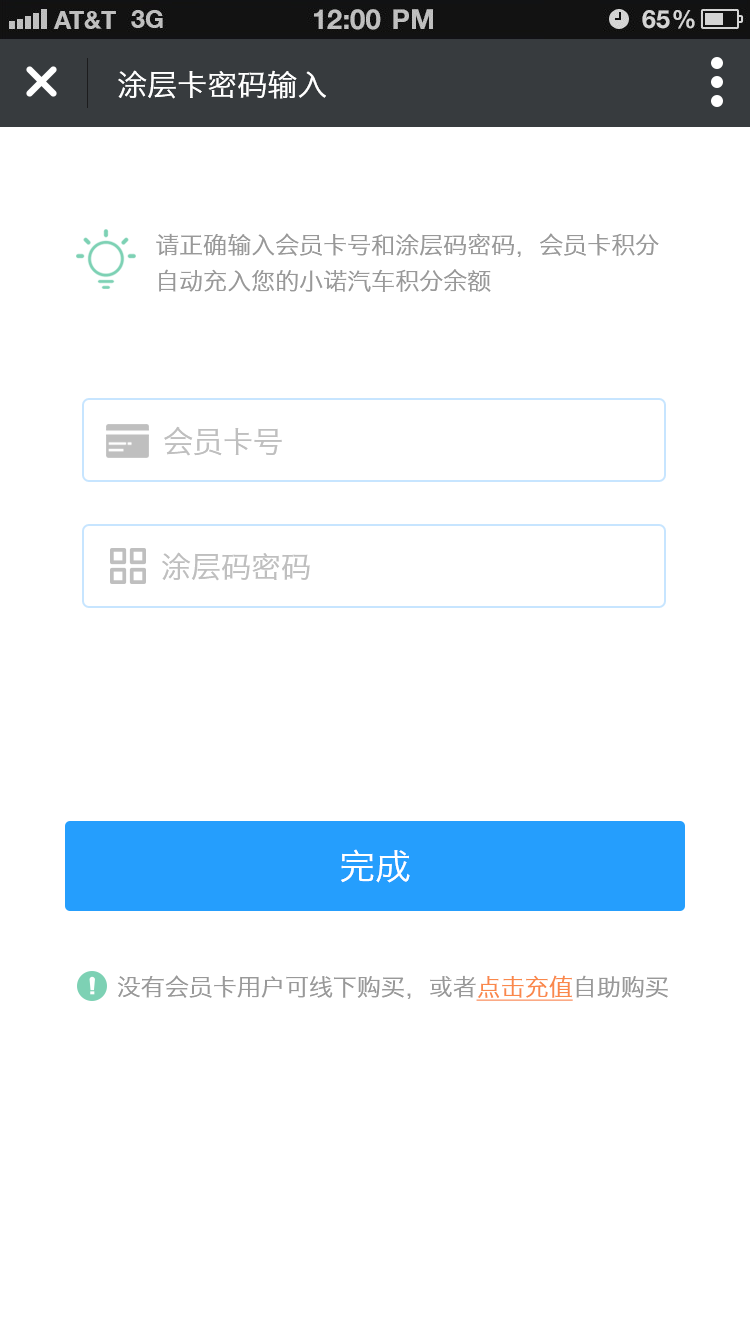
<style>
.page{position:relative;width:750px;height:1334px;background:#ffffff}
.page>*{position:absolute;margin:0}
.t1{font:30px "HiraginoSansGB-W3";color:#ffffff}
.t2{font:24px/36px "HiraginoSansGB-W3";color:#999999}
.t3{font:30px "HiraginoSansGB-W3";color:#bfbfbf}
.t4{font:36px "HiraginoSansGB-W3";color:#ffffff}
.t5{font:24px "HiraginoSansGB-W3";color:#999999}
.t6{font:24px "HiraginoSansGB-W3";color:#fa884b;text-decoration:underline}
</style>
<div class="page">
<p class="t1" style="left:118px;top:70px;width:208px;height:29px">涂层卡密码输入</p>
<p class="t2" style="left:156px;top:233px;width:503px;height:59px">请正确输入会员卡号和涂层码密码，会员卡积分<br>自动充入您的小诺汽车积分余额</p>
<p class="t3" style="left:164px;top:426px;width:118px;height:30px">会员卡号</p>
<p class="t3" style="left:162px;top:552px;width:148px;height:29px">涂层码密码</p>
<p class="t4" style="left:341px;top:849px;width:69px;height:34px">完成</p>
<p class="t5" style="left:117px;top:975px;width:551px;height:26px">没有会员卡用户可线下购买，或者<span class="t6">点击充值</span>自助购买</p>
</div>
